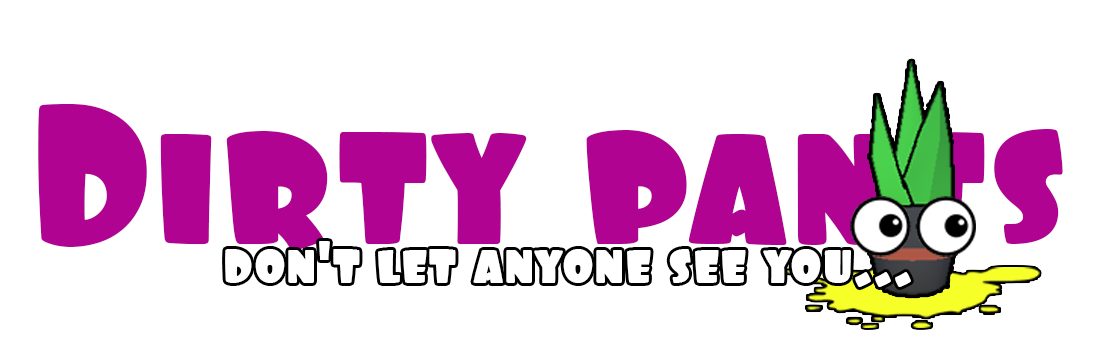
<style>
.page{position:relative;width:1106px;height:340px;background:#ffffff}
.page>*{position:absolute;margin:0}
.t1{font:200px "Foo-Regular";color:#b10392}
.t2{font:60px "Foo-Regular";color:#ffffff}
</style>
<div class="page">
<p class="t1" style="left:38px;top:104px;width:1025px;height:147px">Dirty pants</p>
<p class="t2" style="left:225px;top:241px;width:686px;height:46px">don't let anyone see you...</p>
</div>
